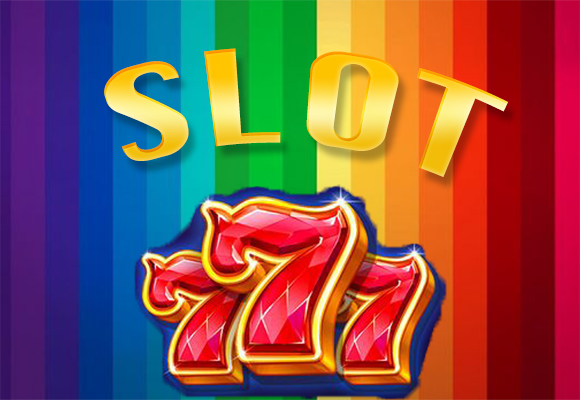
<style>
.page{position:relative;width:580px;height:400px}
.page>*{position:absolute;margin:0}
.t1{font:126.6px "Silom"}
.t2{font:126.6px "AdobeHeitiStd-Regular"}
</style>
<div class="page">
<p class="t1" style="left:104px;top:48px;width:404px;height:129px"><span class="t2">    </span>SLOT</p>
</div>
